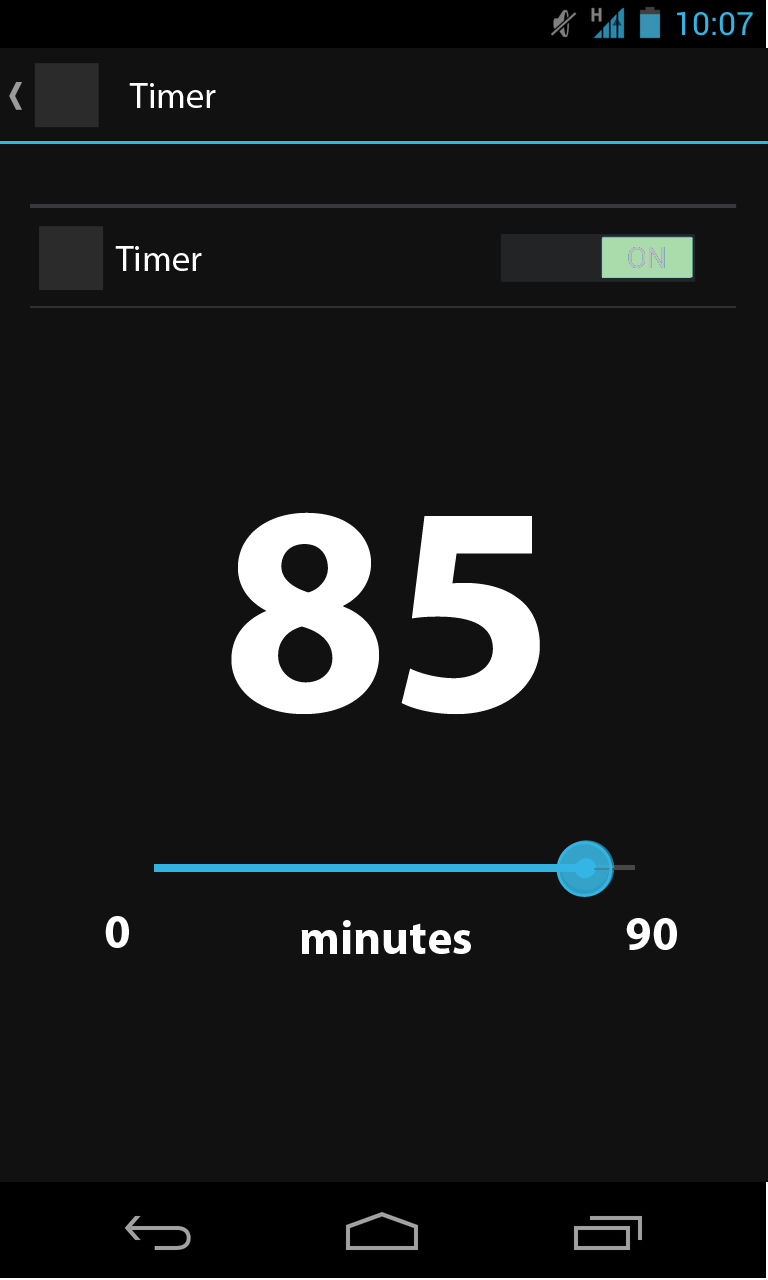
<style>
.page{position:relative;width:768px;height:1280px;background:#111111}
.page>*{position:absolute;margin:0}
.t1{font:36px "MyriadPro-Regular";color:#ffffff}
.t2{font:300px "MyriadPro-Bold";color:#ffffff}
.t3{font:48px "MyriadPro-Bold";color:#ffffff}
</style>
<div class="page">
<p class="t1" style="left:129px;top:83px;width:87px;height:25px">Timer</p>
<p class="t1" style="left:115px;top:246px;width:87px;height:25px">Timer</p>
<p class="t2" style="left:231px;top:512px;width:309px;height:203px">85</p>
<p class="t3" style="left:105px;top:916px;width:24px;height:32px">0</p>
<p class="t3" style="left:626px;top:918px;width:51px;height:32px">90</p>
<p class="t3" style="left:301px;top:920px;width:170px;height:34px">minutes</p>
</div>
